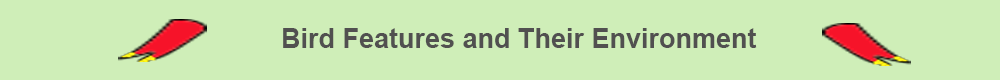
<style>
.page{position:relative;width:1000px;height:80px;background:#cfeeb8}
.page>*{position:absolute;margin:0}
.t1{font:27px "Arial-BoldMT";color:#515050}
</style>
<div class="page">
<p class="t1" style="left:283px;top:28px;width:474px;height:20px">Bird Features and Their Environment</p>
</div>
